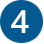
<style>
.page{position:relative;width:44px;height:44px;background:#035990}
.page>*{position:absolute;margin:0}
.t1{font:32px "OpenSans-Semibold";color:#ffffff}
</style>
<div class="page">
<p class="t1" style="left:11px;top:10px;width:18px;height:23px">4</p>
</div>
